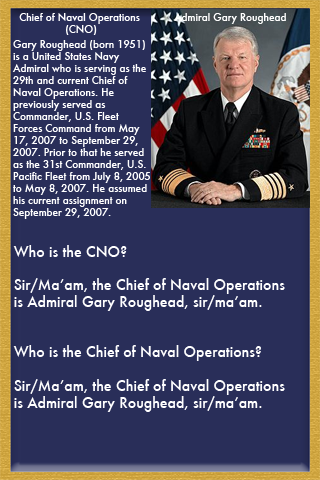
<style>
.page{position:relative;width:320px;height:480px;background:#292e59}
.page>*{position:absolute;margin:0}
.t1{font:10px "Futura-Medium";color:#ffffff}
.t2{font:14px "Futura-Medium";color:#ffffff}
</style>
<div class="page">
<p class="t1" style="left:19px;top:13px;width:121px;height:22px;text-align:center">Chief of Naval Operations <br>(CNO)</p>
<p class="t1" style="left:174px;top:13px;width:112px;height:11px">Admiral Gary Roughead</p>
<p class="t1" style="left:12px;top:40px;width:138px;height:179px">Gary Roughead (born 1951) <br>is a United States Navy <br>Admiral who is serving as the <br>29th and current Chief of <br>Naval Operations. He <br>previously served as <br>Commander, U.S. Fleet <br>Forces Command from May <br>17, 2007 to September 29, <br>2007. Prior to that he served <br>as the 31st Commander, U.S. <br>Pacific Fleet from July 8, 2005 <br>to May 8, 2007. He assumed <br>his current assignment on <br>September 29, 2007.</p>
<p class="t2" style="left:13px;top:245px;width:272px;height:167px">Who is the CNO?<br><br>Sir/Ma’am, the Chief of Naval Operations <br>is Admiral Gary Roughead, sir/ma’am.<br><br><br>Who is the Chief of Naval Operations?<br><br>Sir/Ma’am, the Chief of Naval Operations <br>is Admiral Gary Roughead, sir/ma’am.</p>
</div>
